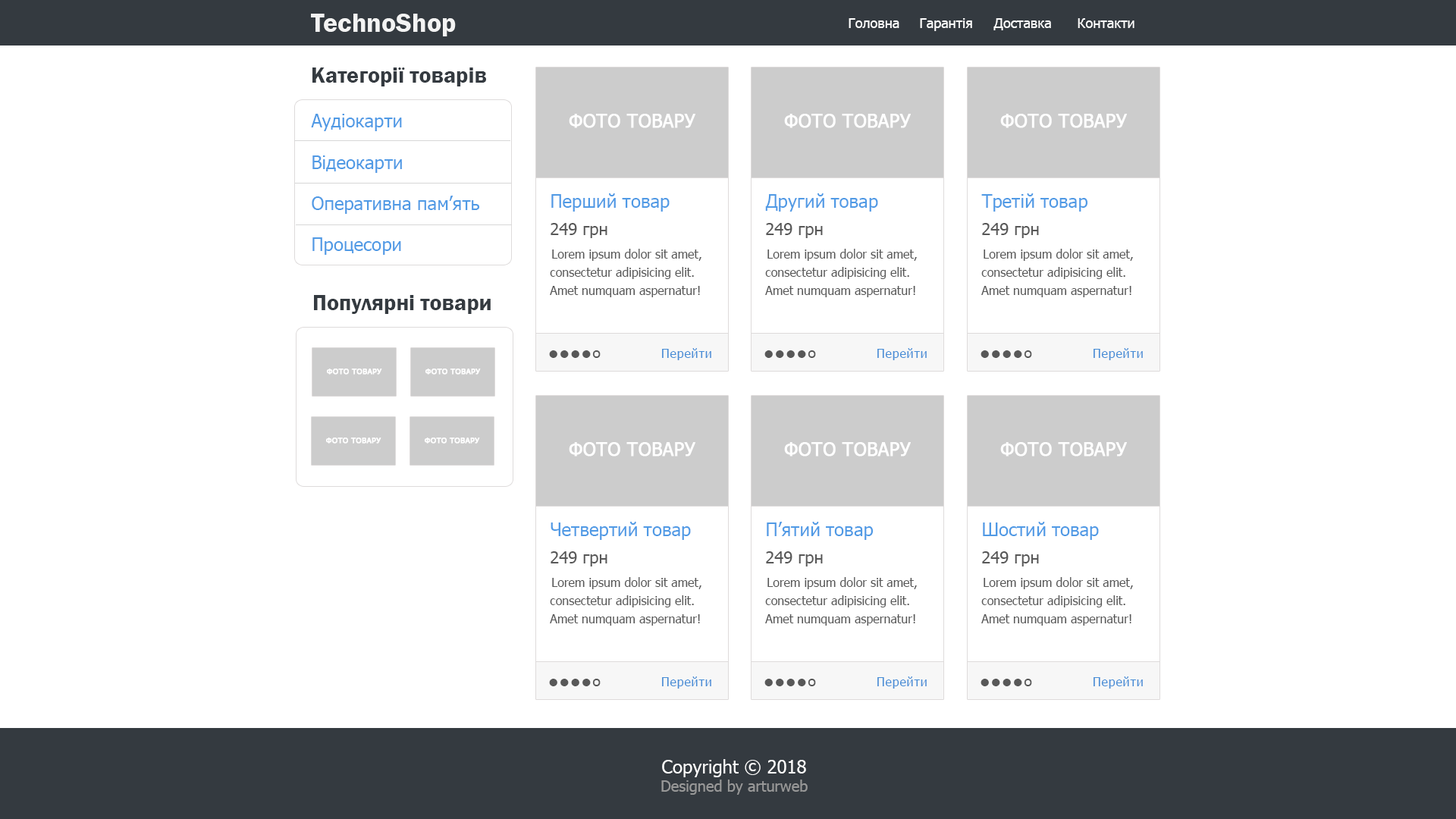
<style>
.page{position:relative;width:1456px;height:819px;background:#ffffff}
.page>*{position:absolute;margin:0}
.t1{font:27.3px "FranklinGothic-Demi";color:#f3f3f3}
.t2{font:13.6px "Tahoma";color:#ffffff}
.t3{font:22.7px "FranklinGothic-Demi";color:#343a40}
.t4{font:18.2px "Tahoma";color:#509ae5}
.t5{font:18.2px "Tahoma";color:#ffffff;font-weight:bold}
.t6{font:16.7px "Tahoma";color:#585858}
.t7{font:12.1px/18.2px "Tahoma";color:#585858}
.t8{font:18.2px "Tahoma";color:#585858}
.t9{font:18.2px "Tahoma";letter-spacing:0.05em;color:#585858}
.t10{font:14.4px "Tahoma";color:#585858}
.t11{font:12.1px "Tahoma";letter-spacing:0.05em;color:#478dd6}
.t12{font:7.9px "Tahoma";color:#ffffff;font-weight:bold}
.t13{font:15.2px "Tahoma";color:#989898}
.t14{font:18.2px "Tahoma";color:#ffffff}
</style>
<div class="page">
<p class="t1" style="left:311px;top:14px;width:145px;height:22px">TechnoShop</p>
<p class="t2" style="left:849px;top:18px;width:50px;height:10px">Головна</p>
<p class="t2" style="left:920px;top:18px;width:52px;height:13px">Гарантія</p>
<p class="t2" style="left:993px;top:18px;width:58px;height:12px">Доставка</p>
<p class="t2" style="left:1078px;top:18px;width:56px;height:10px">Контакти</p>
<p class="t3" style="left:312px;top:67px;width:174px;height:19px">Категорії товарів</p>
<p class="t4" style="left:311px;top:114px;width:91px;height:17px">Аудіокарти</p>
<p class="t5" style="left:569px;top:114px;width:126px;height:14px">ФОТО ТОВАРУ</p>
<p class="t5" style="left:784px;top:114px;width:127px;height:14px">ФОТО ТОВАРУ</p>
<p class="t5" style="left:1000px;top:114px;width:127px;height:14px">ФОТО ТОВАРУ</p>
<p class="t4" style="left:312px;top:155px;width:90px;height:18px">Відеокарти</p>
<p class="t4" style="left:312px;top:196px;width:167px;height:18px">Оперативна пам’ять</p>
<p class="t4" style="left:551px;top:193px;width:119px;height:19px">Перший товар</p>
<p class="t4" style="left:765px;top:193px;width:113px;height:19px">Другий товар</p>
<p class="t4" style="left:981px;top:193px;width:106px;height:19px">Третій товар</p>
<p class="t6" style="left:551px;top:223px;width:56px;height:15px">249 грн</p>
<p class="t6" style="left:766px;top:223px;width:57px;height:15px">249 грн</p>
<p class="t6" style="left:982px;top:223px;width:57px;height:15px">249 грн</p>
<p class="t4" style="left:312px;top:237px;width:89px;height:18px">Процесори</p>
<p class="t7" style="left:550px;top:249px;width:151px;height:48px">Lorem ipsum dolor sit amet, consectetur adipisicing elit. Amet numquam aspernatur!</p>
<p class="t7" style="left:765px;top:249px;width:152px;height:48px">Lorem ipsum dolor sit amet, consectetur adipisicing elit. Amet numquam aspernatur!</p>
<p class="t7" style="left:981px;top:249px;width:152px;height:48px">Lorem ipsum dolor sit amet, consectetur adipisicing elit. Amet numquam aspernatur!</p>
<p class="t3" style="left:314px;top:295px;width:177px;height:19px">Популярні товари</p>
<p class="t8" style="left:549px;top:350px;width:52px;height:8px">●●●<span class="t9">●</span><span class="t10">о</span></p>
<p class="t11" style="left:662px;top:348px;width:49px;height:12px">Перейти</p>
<p class="t8" style="left:764px;top:350px;width:52px;height:8px">●●●<span class="t9">●</span><span class="t10">о</span></p>
<p class="t11" style="left:877px;top:348px;width:50px;height:12px">Перейти</p>
<p class="t8" style="left:981px;top:350px;width:51px;height:8px">●●●<span class="t9">●</span><span class="t10">о</span></p>
<p class="t11" style="left:1094px;top:348px;width:49px;height:12px">Перейти</p>
<p class="t12" style="left:327px;top:369px;width:55px;height:6px">ФОТО ТОВАРУ</p>
<p class="t12" style="left:425px;top:369px;width:56px;height:6px">ФОТО ТОВАРУ</p>
<p class="t12" style="left:326px;top:438px;width:55px;height:6px">ФОТО ТОВАРУ</p>
<p class="t12" style="left:425px;top:438px;width:55px;height:6px">ФОТО ТОВАРУ</p>
<p class="t5" style="left:569px;top:442px;width:126px;height:15px">ФОТО ТОВАРУ</p>
<p class="t5" style="left:784px;top:442px;width:127px;height:15px">ФОТО ТОВАРУ</p>
<p class="t5" style="left:1000px;top:442px;width:127px;height:15px">ФОТО ТОВАРУ</p>
<p class="t4" style="left:551px;top:522px;width:140px;height:18px">Четвертий товар</p>
<p class="t4" style="left:767px;top:522px;width:106px;height:18px">П’ятий товар</p>
<p class="t4" style="left:983px;top:522px;width:116px;height:18px">Шостий товар</p>
<p class="t6" style="left:551px;top:551px;width:56px;height:15px">249 грн</p>
<p class="t6" style="left:766px;top:551px;width:57px;height:15px">249 грн</p>
<p class="t6" style="left:982px;top:551px;width:57px;height:15px">249 грн</p>
<p class="t7" style="left:550px;top:577px;width:151px;height:49px">Lorem ipsum dolor sit amet, consectetur adipisicing elit. Amet numquam aspernatur!</p>
<p class="t7" style="left:765px;top:577px;width:152px;height:49px">Lorem ipsum dolor sit amet, consectetur adipisicing elit. Amet numquam aspernatur!</p>
<p class="t7" style="left:981px;top:577px;width:152px;height:49px">Lorem ipsum dolor sit amet, consectetur adipisicing elit. Amet numquam aspernatur!</p>
<p class="t11" style="left:662px;top:676px;width:49px;height:13px">Перейти</p>
<p class="t11" style="left:877px;top:676px;width:50px;height:13px">Перейти</p>
<p class="t11" style="left:1094px;top:676px;width:49px;height:13px">Перейти</p>
<p class="t8" style="left:549px;top:679px;width:52px;height:7px">●●●<span class="t9">●</span><span class="t10">о</span></p>
<p class="t8" style="left:764px;top:679px;width:52px;height:7px">●●●<span class="t9">●</span><span class="t10">о</span></p>
<p class="t8" style="left:981px;top:679px;width:51px;height:7px">●●●<span class="t9">●</span><span class="t10">о</span></p>
<p class="t13" style="left:661px;top:759px;width:147px;height:36px;text-align:center"><span class="t14">Copyright © 2018<br></span>Designed by arturweb</p>
</div>
